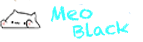
<style>
.page{position:relative;width:143px;height:42px;background:#ffffff}
.page>*{position:absolute;margin:0}
.t1{font:20px "Chalkduster";color:#37fffd}
.t2{font:18px "Chalkduster";color:#37fffd}
</style>
<div class="page">
<p class="t1" style="left:50px;top:5px;width:43px;height:17px;rotate:-1deg">Meo</p>
<p class="t2" style="left:72px;top:21px;width:57px;height:18px;rotate:-6deg">Black</p>
</div>
